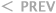
<style>
.page{position:relative;width:56px;height:13px;background:#ffffff}
.page>*{position:absolute;margin:0}
.t1{font:14px "LucidaSansUnicode";color:#a6a6a6;font-weight:bold}
.t2{font:18px "LucidaSansUnicode";color:#a6a6a6;font-weight:bold}
</style>
<div class="page">
<p class="t1" style="left:1px;top:1px;width:55px;height:11px"><span class="t2">&lt; </span>PREV</p>
</div>
